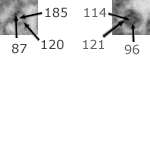
<style>
.page{position:relative;width:150px;height:150px;background:#ffffff}
.page>*{position:absolute;margin:0}
.t1{font:12.5px "Verdana";color:#424242}
.t2{font:12.5px "Verdana";color:#616161}
</style>
<div class="page">
<p class="t1" style="left:45px;top:7px;width:22px;height:11px">185</p>
<p class="t2" style="left:84px;top:8px;width:23px;height:9px">114</p>
<p class="t1" style="left:41px;top:39px;width:23px;height:11px">120</p>
<p class="t2" style="left:83px;top:39px;width:21px;height:10px">121</p>
<p class="t1" style="left:12px;top:43px;width:15px;height:11px">87</p>
<p class="t2" style="left:124px;top:44px;width:16px;height:11px">96</p>
</div>
